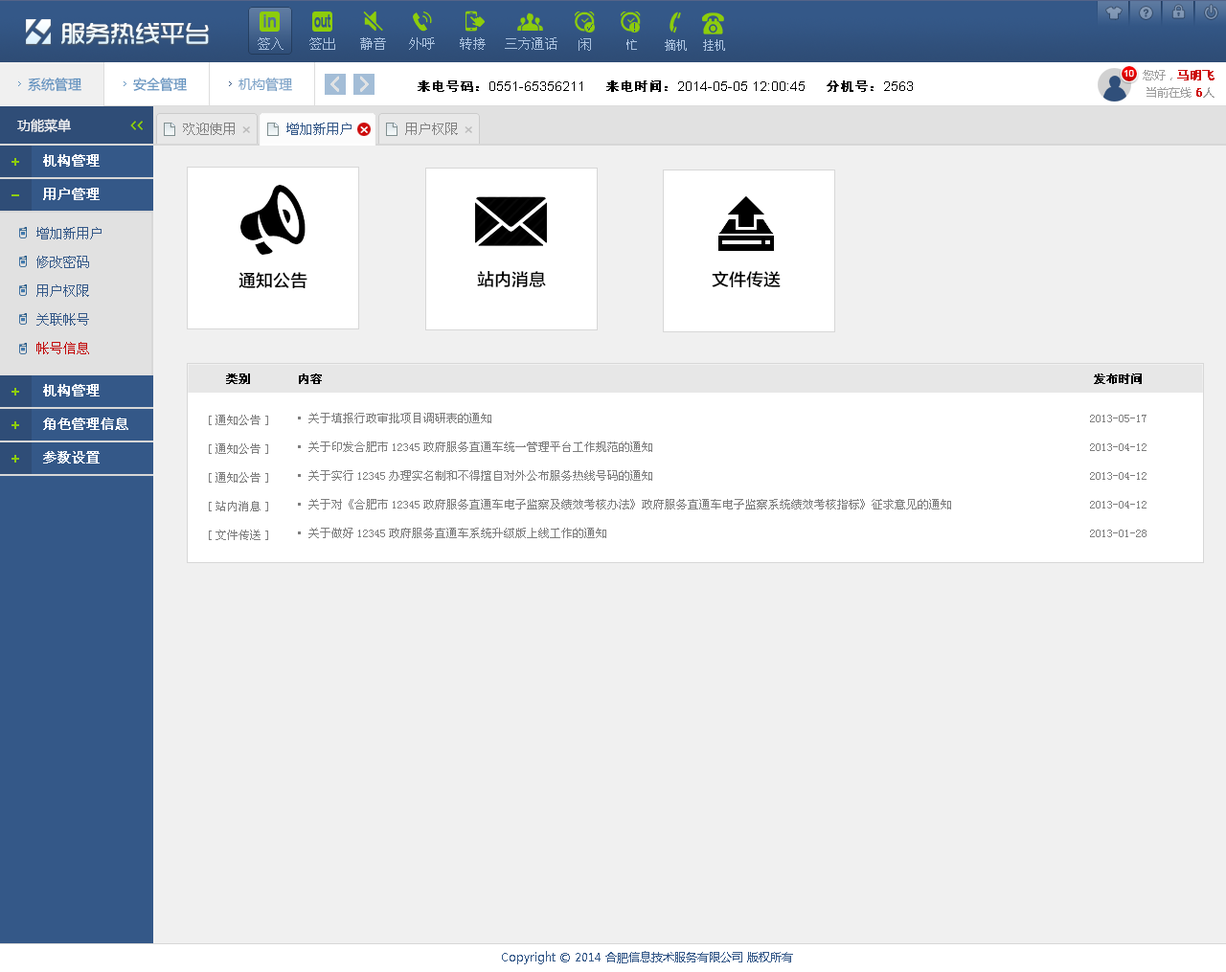
<style>
.page{position:relative;width:1226px;height:972px;background:#f0f0f0}
.page>*{position:absolute;margin:0}
.t1{font:24.9px "TRENDS";color:#ffffff}
.t2{font:13.4px "SimSun";color:#acc3e0}
.t3{font:11.5px "SimSun";color:#acc3e0}
.t4{font:13.4px "MicrosoftYaHei";color:#5c8fbe}
.t5{font:13.4px "MicrosoftYaHei";color:#79a1c7}
.t6{font:9.6px "ArialMT";color:#ffffff}
.t7{font:11.5px/17.2px "MicrosoftYaHei";color:#9e9e9e}
.t8{font:11.5px/17.2px "MicrosoftYaHei";color:#cd0b0b;font-weight:bold}
.t9{font:13.4px "ArialMT";color:#000000}
.t10{font:13.4px "SimHei";color:#000000;font-weight:bold}
.t11{font:13.4px "MicrosoftYaHei";color:#ffffff}
.t12{font:13.4px "SimSun";color:#818181}
.t13{font:13.4px "SimSun";color:#345888}
.t14{font:17.2px "ArialMT";color:#bcbcbc}
.t15{font:17.2px "ArialMT";color:#ffffff}
.t16{font:13.4px "SimSun";color:#ffffff;font-weight:bold}
.t17{font:13.4px/28.7px "SimSun";color:#345888}
.t18{font:13.4px/28.7px "SimSun";color:#c20808}
.t19{font:17.2px "FZLTZHK--GBK1-0";color:#000000}
.t20{font:11.5px "SimSun";color:#000000;font-weight:bold}
.t21{font:11.5px/28.7px "SimSun";color:#7e7e7e}
.t22{font:11.5px "MicrosoftYaHei";color:#345888}
</style>
<div class="page">
<p class="t1" style="left:61px;top:23px;width:148px;height:21px">服务热线平台</p>
<p class="t2" style="left:258px;top:37px;width:26px;height:13px">签入</p>
<p class="t2" style="left:309px;top:37px;width:26px;height:13px">签出</p>
<p class="t2" style="left:360px;top:37px;width:26px;height:13px">静音</p>
<p class="t2" style="left:409px;top:37px;width:26px;height:13px">外呼</p>
<p class="t2" style="left:460px;top:37px;width:26px;height:13px">转接</p>
<p class="t2" style="left:505px;top:37px;width:53px;height:13px">三方通话</p>
<p class="t2" style="left:579px;top:38px;width:12px;height:13px">闲</p>
<p class="t3" style="left:627px;top:39px;width:10px;height:11px">忙</p>
<p class="t3" style="left:665px;top:39px;width:22px;height:12px">摘机</p>
<p class="t3" style="left:703px;top:39px;width:22px;height:12px">挂机</p>
<p class="t4" style="left:28px;top:78px;width:53px;height:14px">系统管理</p>
<p class="t4" style="left:133px;top:78px;width:54px;height:14px">安全管理</p>
<p class="t5" style="left:239px;top:78px;width:53px;height:14px">机构管理</p>
<p class="t6" style="left:1125px;top:70px;width:9px;height:7px">10</p>
<p class="t7" style="left:1143px;top:70px;width:72px;height:28px;text-align:right">您好，<span class="t8">马明飞</span><br>当前在线 <span class="t8">6</span>人</p>
<p class="t9" style="left:418px;top:80px;width:495px;height:12px"><span class="t10">来电号码：</span>0551-65356211   <span class="t10">来电时间：</span>2014-05-05 12:00:45   <span class="t10">分机号：</span>2563</p>
<p class="t11" style="left:17px;top:119px;width:54px;height:14px">功能菜单</p>
<p class="t12" style="left:183px;top:123px;width:52px;height:12px">欢迎使用</p>
<p class="t13" style="left:286px;top:123px;width:66px;height:12px">增加新用户</p>
<p class="t12" style="left:405px;top:123px;width:53px;height:12px">用户权限</p>
<p class="t14" style="left:242px;top:126px;width:8px;height:7px">×</p>
<p class="t15" style="left:360px;top:126px;width:8px;height:7px">×</p>
<p class="t14" style="left:465px;top:126px;width:7px;height:7px">×</p>
<p class="t16" style="left:43px;top:154px;width:57px;height:13px">机构管理</p>
<p class="t16" style="left:43px;top:188px;width:57px;height:12px">用户管理</p>
<p class="t17" style="left:36px;top:227px;width:66px;height:127px">增加新用户<br>修改密码<br>用户权限<br>关联帐号<br><span class="t18">帐号信息</span></p>
<p class="t19" style="left:239px;top:272px;width:69px;height:16px">通知公告</p>
<p class="t19" style="left:477px;top:271px;width:69px;height:16px">站内消息</p>
<p class="t19" style="left:712px;top:271px;width:69px;height:16px">文件传送</p>
<p class="t20" style="left:226px;top:374px;width:916px;height:10px">类别       内容                                                                                                                   发布时间</p>
<p class="t16" style="left:43px;top:384px;width:57px;height:13px">机构管理</p>
<p class="t21" style="left:298px;top:413px;width:849px;height:125px">·关于填报行政审批项目调研表的通知                                                                                                        2013-05-17<br>·关于印发合肥市12345政府服务直通车统一管理平台工作规范的通知                                                                            2013-04-12<br>·关于实行12345办理实名制和不得擅自对外公布服务热线号码的通知                                                                            2013-04-12<br>·关于对《合肥市12345政府服务直通车电子监察及绩效考核办法》政府服务直通车电子监察系统绩效考核指标》征求意见的通知                        2013-04-12<br>·关于做好12345政府服务直通车系统升级版上线工作的通知                                                                                    2013-01-28</p>
<p class="t16" style="left:43px;top:418px;width:85px;height:12px">角色管理信息</p>
<p class="t21" style="left:209px;top:415px;width:59px;height:125px">[通知公告]<br>[通知公告]<br>[通知公告]<br>[站内消息]<br>[文件传送]</p>
<p class="t16" style="left:43px;top:451px;width:57px;height:13px">参数设置</p>
<p class="t22" style="left:502px;top:951px;width:291px;height:14px">Copyright © 2014 合肥信息技术服务有限公司 版权所有</p>
</div>
